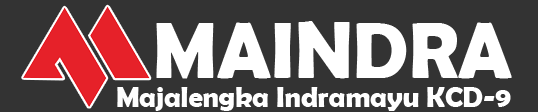
<style>
.page{position:relative;width:538px;height:112px;background:#333333}
.page>*{position:absolute;margin:0}
.t1{font:80.7px "BerlinSansFBDemi-Bold";color:#ffffff;scale:0.97 1}
.t2{font:28.5px "BerlinSansFBDemi-Bold";color:#ffffff}
</style>
<div class="page">
<p class="t1" style="left:156px;top:21px;width:356px;height:58px">MAINDRA</p>
<p class="t2" style="left:117px;top:87px;width:394px;height:24px">Majalengka Indramayu KCD-9</p>
</div>
